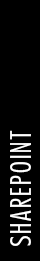
<style>
.page{position:relative;width:40px;height:261px;background:#000000}
.page>*{position:absolute;margin:0}
.t1{font:28px "FuturaStd-CondensedLight";letter-spacing:0.06em;color:#ffffff;text-transform:uppercase}
</style>
<div class="page">
<p class="t1" style="left:10px;top:130px;width:21px;height:116px;rotate:-90deg">SharePoint</p>
</div>
